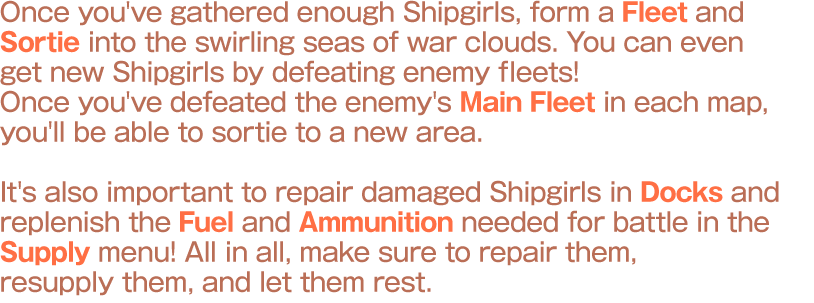
<style>
.page{position:relative;width:814px;height:303px;background:#ffffff}
.page>*{position:absolute;margin:0}
.t1{font:26px/30px "GothicMB101Pro-Medium";letter-spacing:-0.02em;color:#ba6e56;scale:0.95 1}
.t2{font:26px/30px "GothicMB101Pro-Bold";letter-spacing:-0.02em;color:#ff6f44;scale:0.95 1}
</style>
<div class="page">
<p class="t1" style="left:0px;top:0px;width:779px;height:296px">Once you've gathered enough Shipgirls, form a <span class="t2">Fleet</span> and<br><span class="t2">Sortie</span> into the swirling seas of war clouds. You can even<br>get new Shipgirls by defeating enemy fleets!<br>Once you've defeated the enemy's <span class="t2">Main Fleet</span> in each map,<br>you'll be able to sortie to a new area.<br><br>It's also important to repair damaged Shipgirls in <span class="t2">Docks</span> and<br>replenish the <span class="t2">Fuel</span> and <span class="t2">Ammunition</span> needed for battle in the<br><span class="t2">Supply</span> menu! All in all, make sure to repair them,<br>resupply them, and let them rest.</p>
</div>
